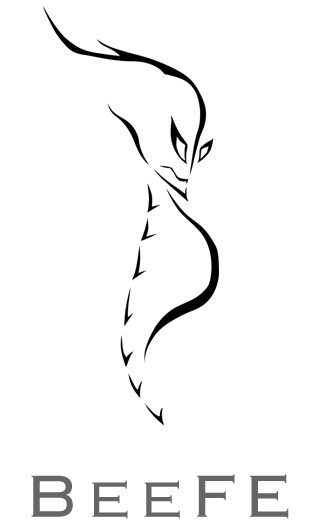
<style>
.page{position:relative;width:320px;height:530px;background:#ffffff}
.page>*{position:absolute;margin:0}
.t1{font:78px "Copperplate-Light";letter-spacing:0.06em;color:#666666}
</style>
<div class="page">
<p class="t1" style="left:31px;top:474px;width:258px;height:45px">BeeFE</p>
</div>
